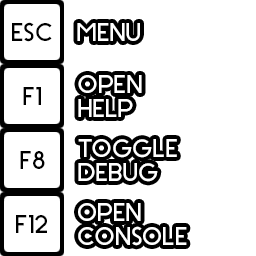
<style>
.page{position:relative;width:256px;height:256px;background:#ffffff}
.page>*{position:absolute;margin:0}
.t1{font:24px "Stark";color:#000000}
.t2{font:24px "Stark";color:#ffffff}
.t3{font:24px/24px "Stark";color:#ffffff}
</style>
<div class="page">
<p class="t1" style="left:12px;top:22px;width:40px;height:20px">ESC</p>
<p class="t2" style="left:77px;top:23px;width:63px;height:18px">MENU</p>
<p class="t3" style="left:78px;top:75px;width:64px;height:42px">OPEN<br>HELP</p>
<p class="t1" style="left:23px;top:87px;width:18px;height:18px">F1</p>
<p class="t3" style="left:78px;top:139px;width:99px;height:43px">TOGGLE<br>DEBUG</p>
<p class="t1" style="left:20px;top:151px;width:25px;height:18px">F8</p>
<p class="t3" style="left:78px;top:203px;width:109px;height:43px">OPEN<br>CONSOLE</p>
<p class="t1" style="left:16px;top:215px;width:31px;height:18px">F12</p>
</div>
